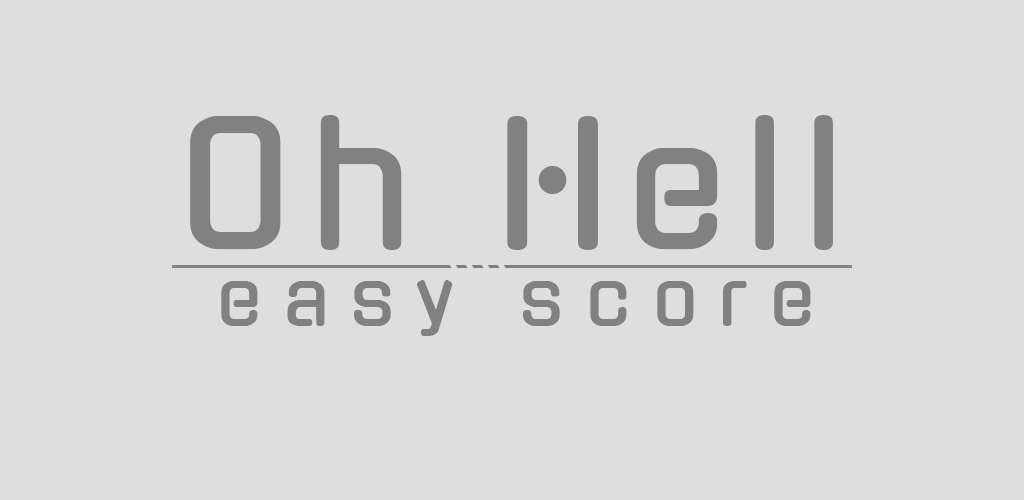
<style>
.page{position:relative;width:1024px;height:500px;background:#dedede}
.page>*{position:absolute;margin:0}
.t1{font:166.7px "Gugi-Regular";letter-spacing:0.1em;color:#818181}
.t2{font:75px "Gugi-Regular";letter-spacing:0.28em;color:#818181}
</style>
<div class="page">
<p class="t1" style="left:190px;top:115px;width:643px;height:135px">Oh Hell</p>
<p class="t2" style="left:221px;top:280px;width:590px;height:56px">easy score</p>
</div>
